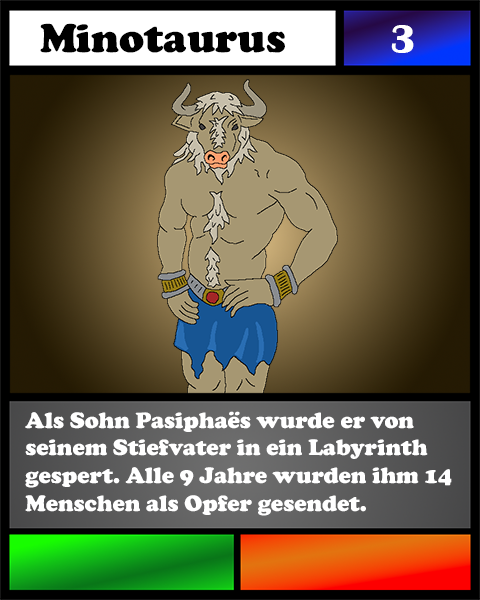
<style>
.page{position:relative;width:480px;height:600px}
.page>*{position:absolute;margin:0}
.t1{font:41.7px "CooperBlack";color:#000000}
.t2{font:41.7px "BritannicBold";color:#ffffff}
.t3{font:23.1px "CooperBlack";color:#ffffff}
</style>
<div class="page">
<p class="t1" style="left:40px;top:23px;width:245px;height:30px">Minotaurus</p>
<p class="t2" style="left:391px;top:25px;width:23px;height:28px">3</p>
<p class="t3" style="left:25px;top:411px;width:427px;height:105px">Als Sohn Pasiphaës wurde er von <br>seinem Stiefvater in ein Labyrinth gespert. Alle 9 Jahre wurden ihm 14<br>Menschen als Opfer gesendet.</p>
</div>
